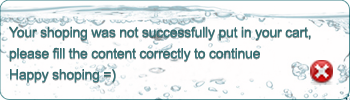
<style>
.page{position:relative;width:350px;height:100px;background:#fffefe}
.page>*{position:absolute;margin:0}
.t1{font:14px/21.1px "ArialMT";letter-spacing:-0.015em;color:#366f74}
</style>
<div class="page">
<p class="t1" style="left:9px;top:26px;width:302px;height:57px">Your shoping was not successfully put in your cart,<br>please fill the content correctly to continue<br>Happy shoping =)</p>
</div>
